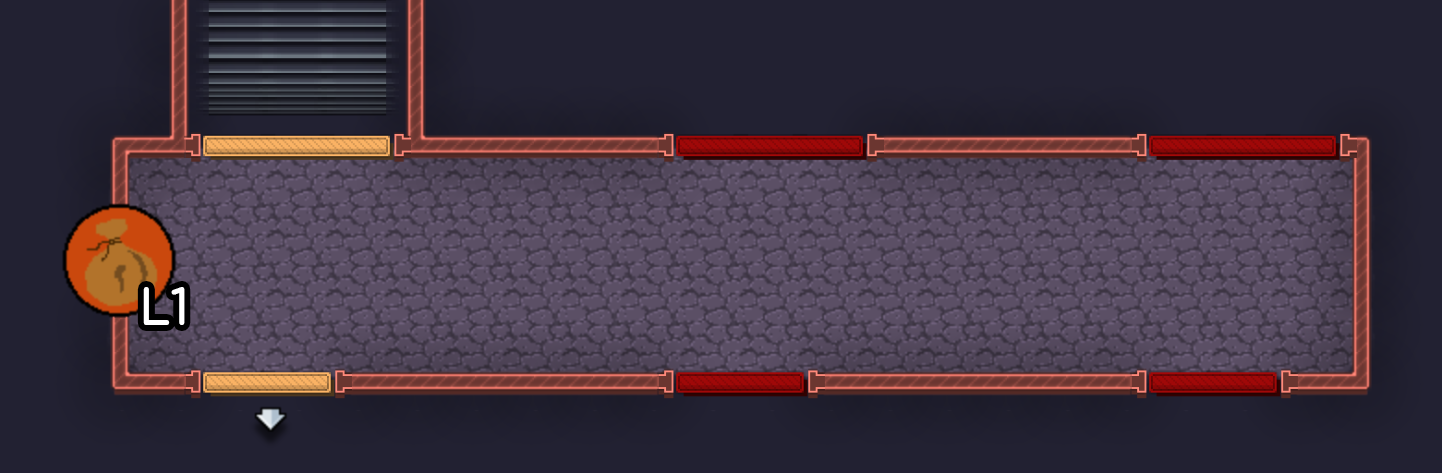
<style>
.page{position:relative;width:1442px;height:473px;background:#222132}
.page>*{position:absolute;margin:0}
.t1{font:48.7px "Comfortaa-Bold";color:#ffffff}
</style>
<div class="page">
<p class="t1" style="left:143px;top:287px;width:42px;height:38px">L1</p>
</div>
